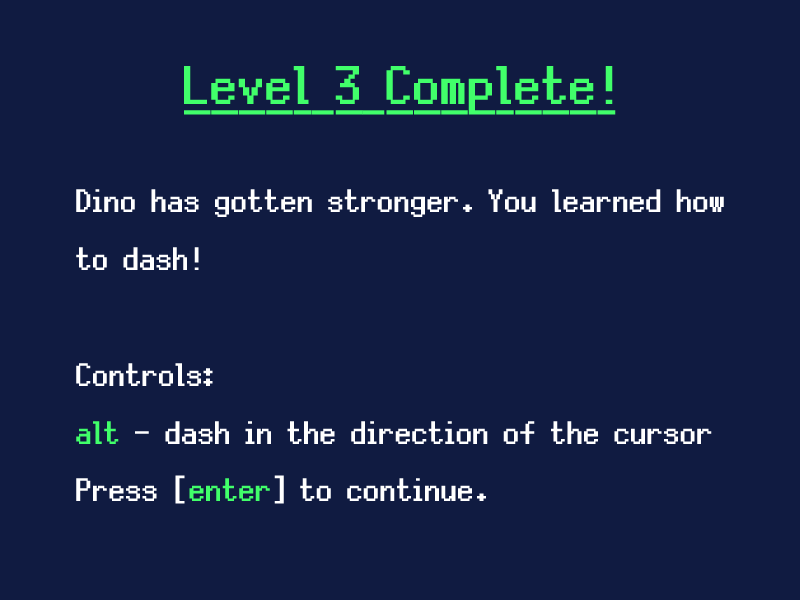
<style>
.page{position:relative;width:800px;height:600px;background:#101b41}
.page>*{position:absolute;margin:0}
.t1{font:80px "Silver";color:#41ff6a;font-weight:bold;text-decoration:underline}
.t2{font:48.2px "Silver";color:#ffffff;font-weight:bold}
.t3{font:48.2px "Silver";color:#41ff6a;font-weight:bold}
</style>
<div class="page">
<p class="t1" style="left:183px;top:66px;width:433px;height:49px">Level 3 Complete!</p>
<p class="t2" style="left:76px;top:189px;width:648px;height:315px">Dino has gotten stronger. You learned how<br>to dash!<br><br>Controls: <br><span class="t3">alt </span>- dash in the direction of the cursor<br>Press [<span class="t3">enter</span>] to continue.</p>
</div>
